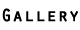
<style>
.page{position:relative;width:80px;height:30px;background:#ffffff}
.page>*{position:absolute;margin:0}
.t1{font:18px "OratorStd";color:#000000;font-weight:bold}
</style>
<div class="page">
<p class="t1" style="left:2px;top:8px;width:76px;height:14px">Gallery</p>
</div>
